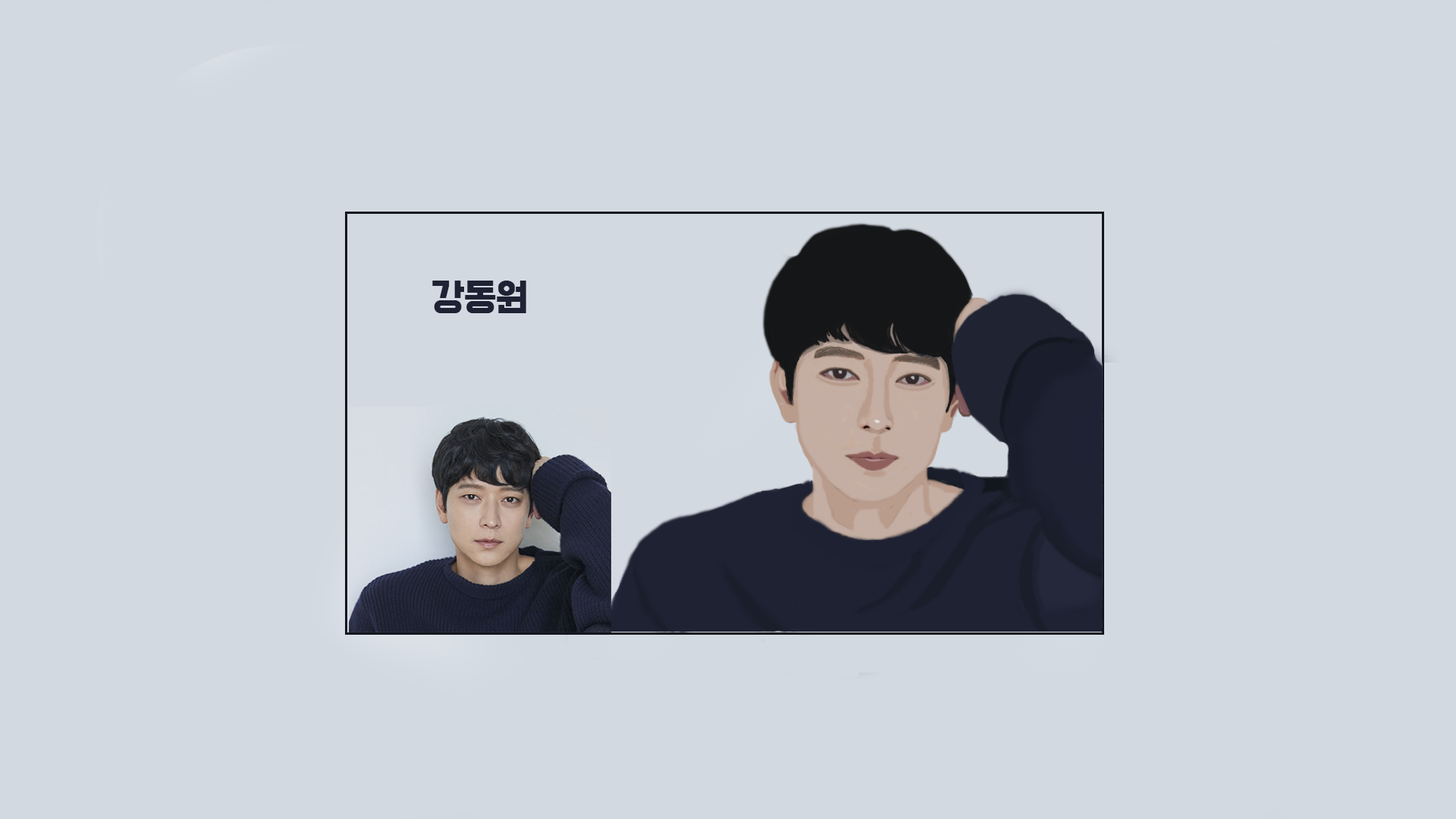
<style>
.page{position:relative;width:1456px;height:819px;background:#d2d9e1}
.page>*{position:absolute;margin:0}
.t1{font:42.8px "DoHyeon-Regular";letter-spacing:-0.05em;color:#1f2233;font-weight:bold}
</style>
<div class="page">
<p class="t1" style="left:432px;top:281px;width:94px;height:32px">강동원</p>
</div>
